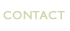
<style>
.page{position:relative;width:70px;height:31px;background:#ffffff}
.page>*{position:absolute;margin:0}
.t1{font:12px "Chantilly";letter-spacing:0.1em;color:#d2d5ac;font-weight:bold}
</style>
<div class="page">
<p class="t1" style="left:3px;top:11px;width:62px;height:9px">CONTACT</p>
</div>
